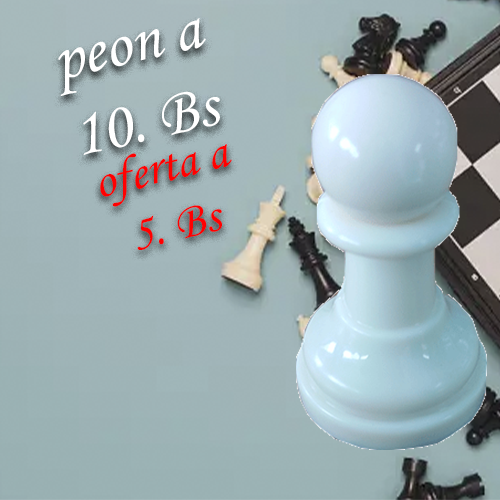
<style>
.page{position:relative;width:500px;height:500px}
.page>*{position:absolute;margin:0}
.t1{font:65.6px "MonotypeCorsiva";color:#ffffff}
.t2{font:50px "MonotypeCorsiva";color:#ff0000}
</style>
<div class="page">
<p class="t1" style="left:58px;top:18px;width:162px;height:138px;text-align:center;rotate:-13deg">peon a<br>10. Bs</p>
<p class="t2" style="left:100px;top:144px;width:132px;height:106px;text-align:center;rotate:-14deg">oferta a<br>5. Bs</p>
</div>
